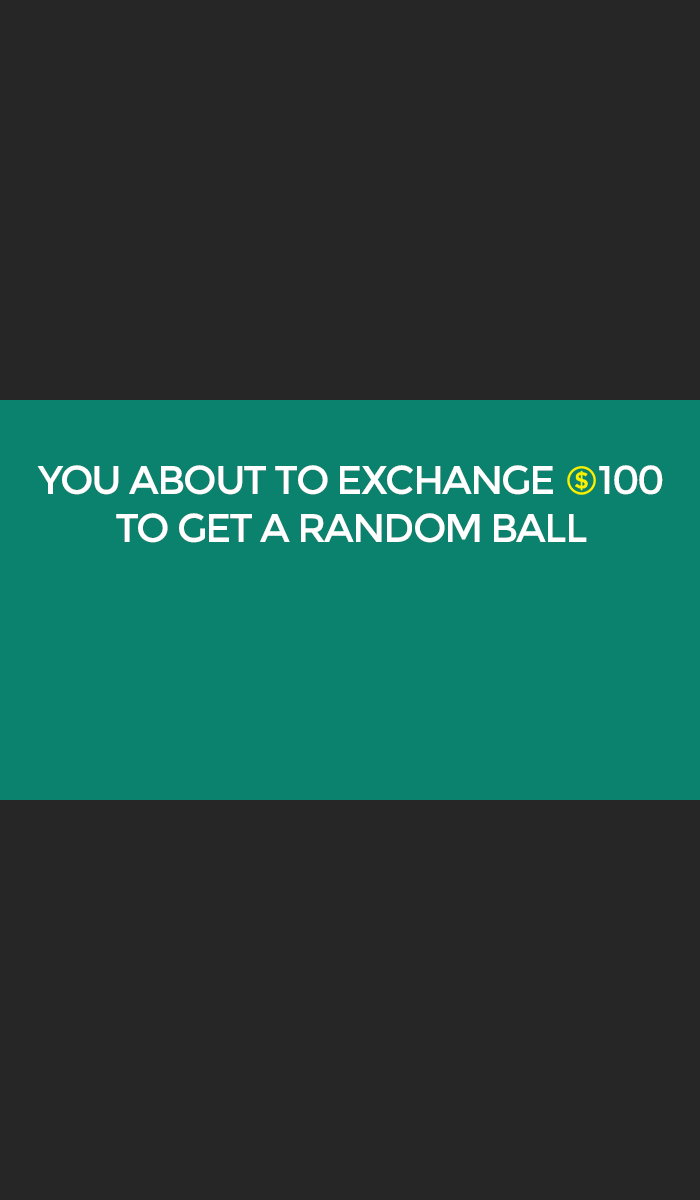
<style>
.page{position:relative;width:700px;height:1200px;background:#262626}
.page>*{position:absolute;margin:0}
.t1{font:40px "Montserrat-Regular";letter-spacing:-0.05em;color:#ffffff}
</style>
<div class="page">
<p class="t1" style="left:37px;top:465px;width:626px;height:78px;text-align:center">YOU ABOUT TO EXCHANGE     100<br>TO GET A RANDOM BALL</p>
</div>
